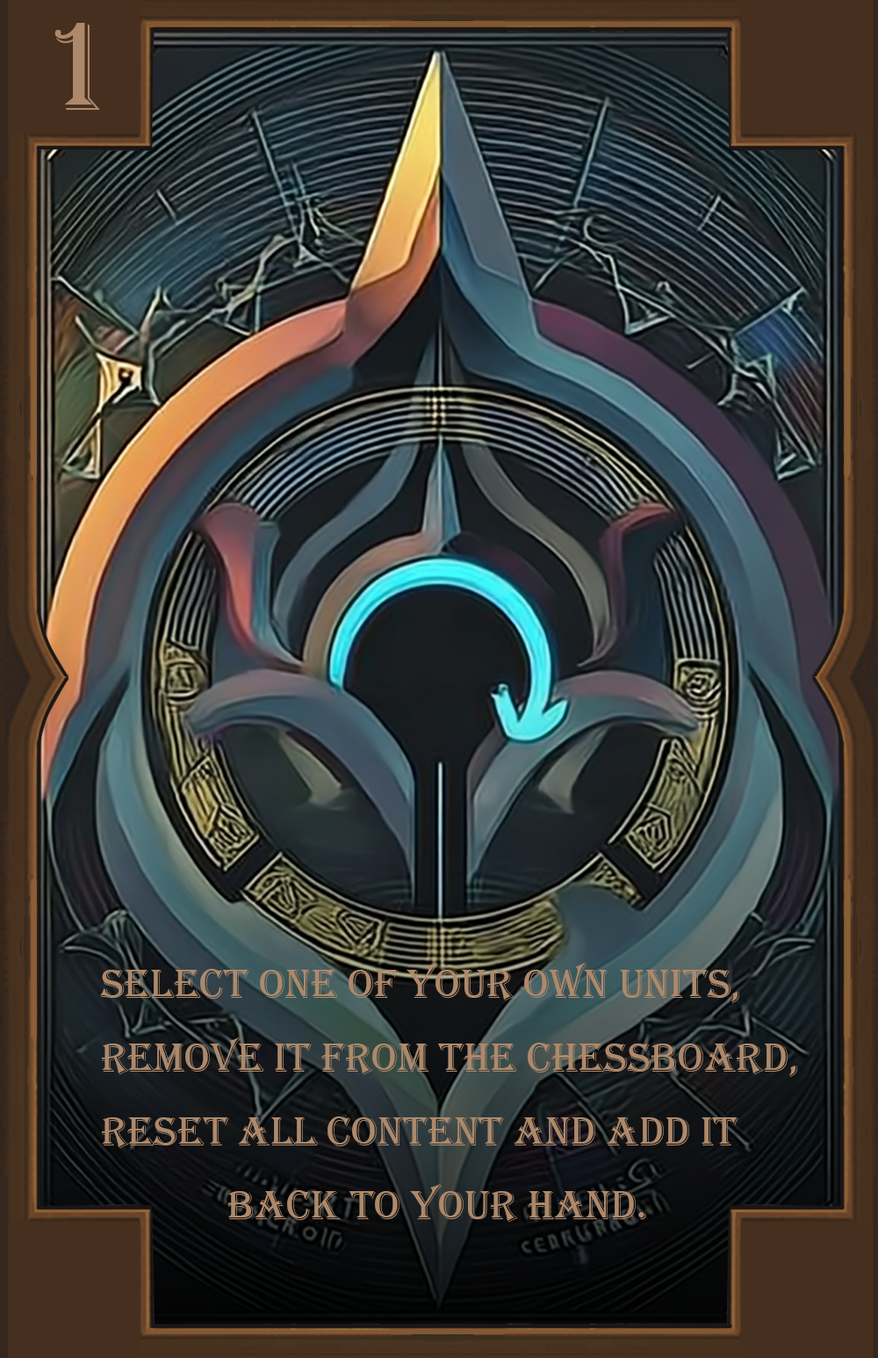
<style>
.page{position:relative;width:878px;height:1358px}
.page>*{position:absolute;margin:0}
.t1{font:131.7px "Algerian";color:#ad896b}
.t2{font:42.2px "Algerian";color:#ad896b}
</style>
<div class="page">
<p class="t1" style="left:54px;top:23px;width:46px;height:87px">1</p>
<p class="t2" style="left:100px;top:962px;width:697px;height:261px">Select one of your own units, <br>remove it from the chessboard,<br>Reset all content and add it <br>            back to your hand.</p>
</div>
